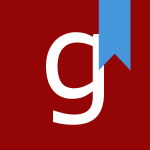
<style>
.page{position:relative;width:150px;height:150px;background:#940606}
.page>*{position:absolute;margin:0}
.t1{font:120px "Verdana";color:#ffffff}
</style>
<div class="page">
<p class="t1" style="left:46px;top:32px;width:58px;height:93px">g</p>
</div>
